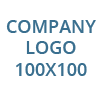
<style>
.page{position:relative;width:100px;height:100px;background:#ffffff}
.page>*{position:absolute;margin:0}
.t1{font:18px "OpenSans-Semibold";color:#3a6f8f;text-transform:uppercase}
</style>
<div class="page">
<p class="t1" style="left:6px;top:20px;width:90px;height:56px;text-align:center">Company<br>Logo<br>100x100</p>
</div>
